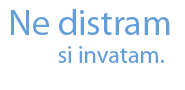
<style>
.page{position:relative;width:185px;height:90px;background:#ffffff}
.page>*{position:absolute;margin:0}
.t1{font:36px "MyriadPro-Regular";color:#639edb}
.t2{font:24px "MyriadPro-Regular";color:#639edb}
</style>
<div class="page">
<p class="t1" style="left:11px;top:9px;width:159px;height:26px">Ne distram</p>
<p class="t2" style="left:58px;top:46px;width:106px;height:17px">si invatam.</p>
</div>
